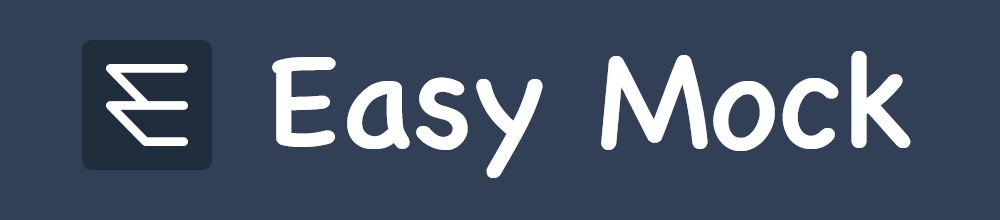
<style>
.page{position:relative;width:1000px;height:220px;background:#324057}
.page>*{position:absolute;margin:0}
.t1{font:136.4px "ChalkboardSE-Regular";color:#ffffff}
</style>
<div class="page">
<p class="t1" style="left:272px;top:51px;width:639px;height:127px">Easy Mock</p>
</div>
